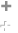
<style>
.page{position:relative;width:18px;height:33px;background:#ffffff}
.page>*{position:absolute;margin:0}
.t1{font:18.6px "Helvetica-Bold";color:#8b8b8b}
</style>
<div class="page">
<p class="t1" style="left:1px;top:1px;width:11px;height:10px">+</p>
</div>
